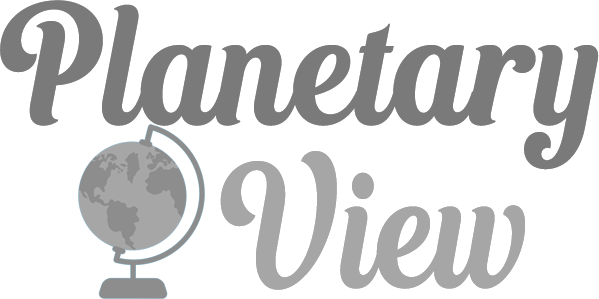
<style>
.page{position:relative;width:599px;height:299px;background:#ffffff}
.page>*{position:absolute;margin:0}
.t1{font:217.5px "BeancoDemo-Italic";letter-spacing:0.005em;color:#7a7a7a;scale:0.9 1}
.t2{font:217.5px "BeancoDemo-Italic";letter-spacing:0.005em;color:#7a7a7a}
.t3{font:221.6px "BeancoDemo-Italic";letter-spacing:0.005em;color:#a6a6a6;scale:0.82 1}
</style>
<div class="page">
<p class="t1" style="left:0px;top:0px;width:599px;height:170px">Planeta<span class="t2">r</span>y</p>
<p class="t3" style="left:220px;top:151px;width:305px;height:139px">View</p>
</div>
